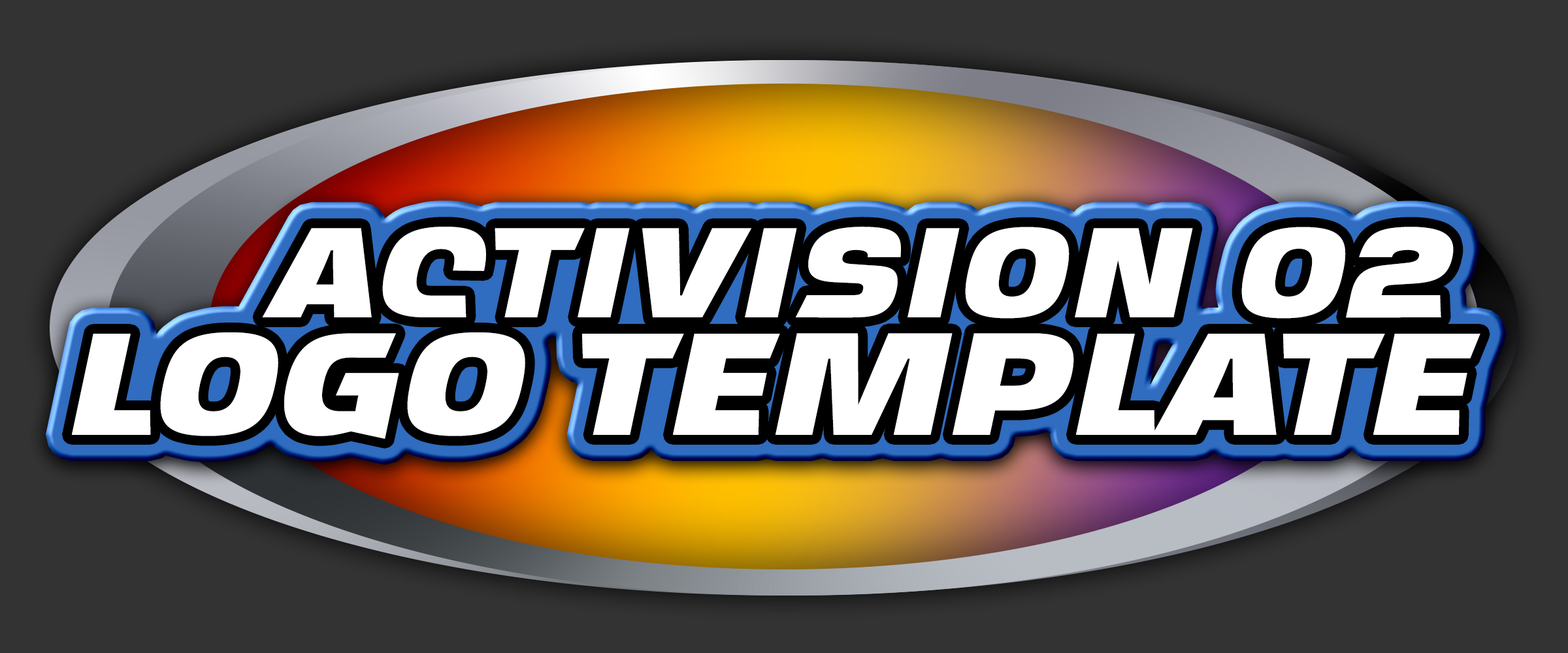
<style>
.page{position:relative;width:1568px;height:653px;background:#333333}
.page>*{position:absolute;margin:0}
.t1{font:143.7px "Ritafurey-BoldItalic";color:#ffffff}
.t2{font:163.3px "Ritafurey-BoldItalic";letter-spacing:-0.02em;color:#ffffff}
</style>
<div class="page">
<p class="t1" style="left:262px;top:227px;width:1192px;height:92px">ACTIVISION O2</p>
<p class="t2" style="left:72px;top:333px;width:1408px;height:106px">LOGO TEMPLATE</p>
</div>
